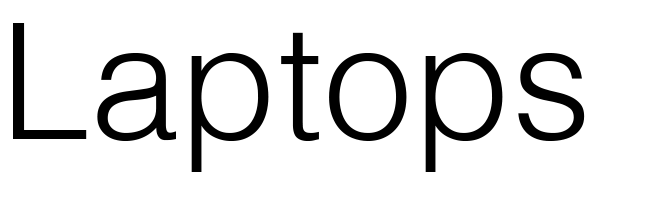
<style>
.page{position:relative;width:652px;height:206px;background:#ffffff}
.page>*{position:absolute;margin:0}
.t1{font:161.3px "Helvetica-Light";color:#000000}
</style>
<div class="page">
<p class="t1" style="left:13px;top:23px;width:572px;height:149px">Laptops</p>
</div>
